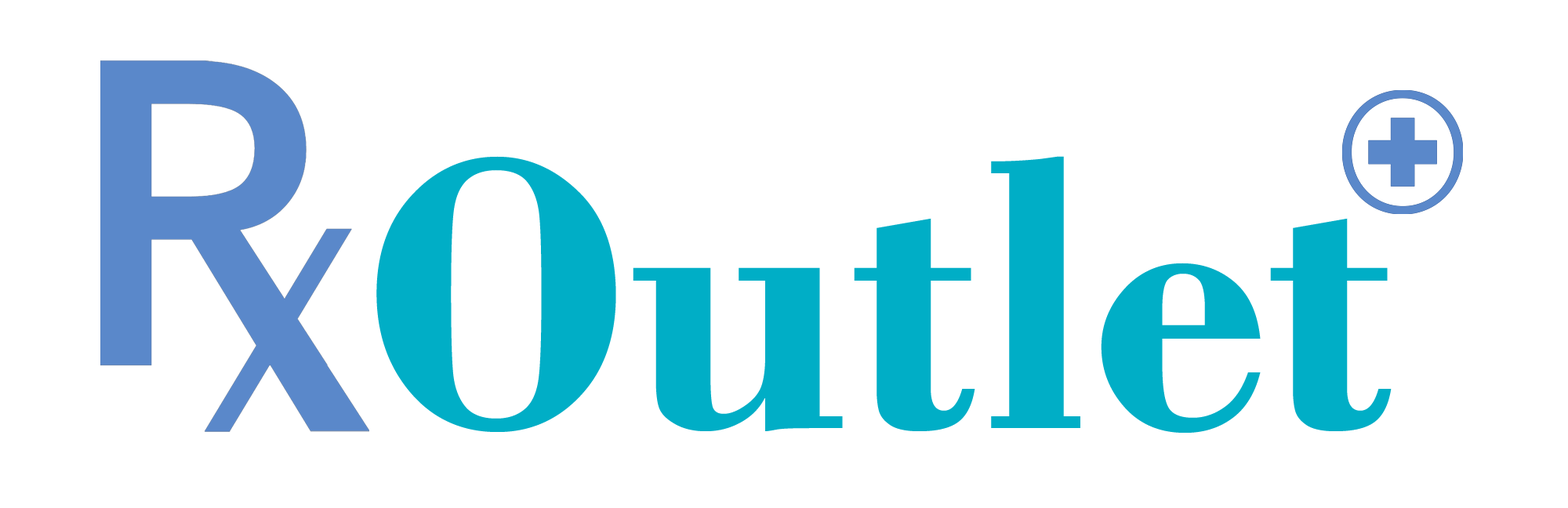
<style>
.page{position:relative;width:1568px;height:508px;background:#ffffff}
.page>*{position:absolute;margin:0}
.t1{font:407.8px "BodoniMT-Bold";color:#00aec6}
</style>
<div class="page">
<p class="t1" style="left:376px;top:156px;width:1016px;height:277px">Outlet</p>
</div>
